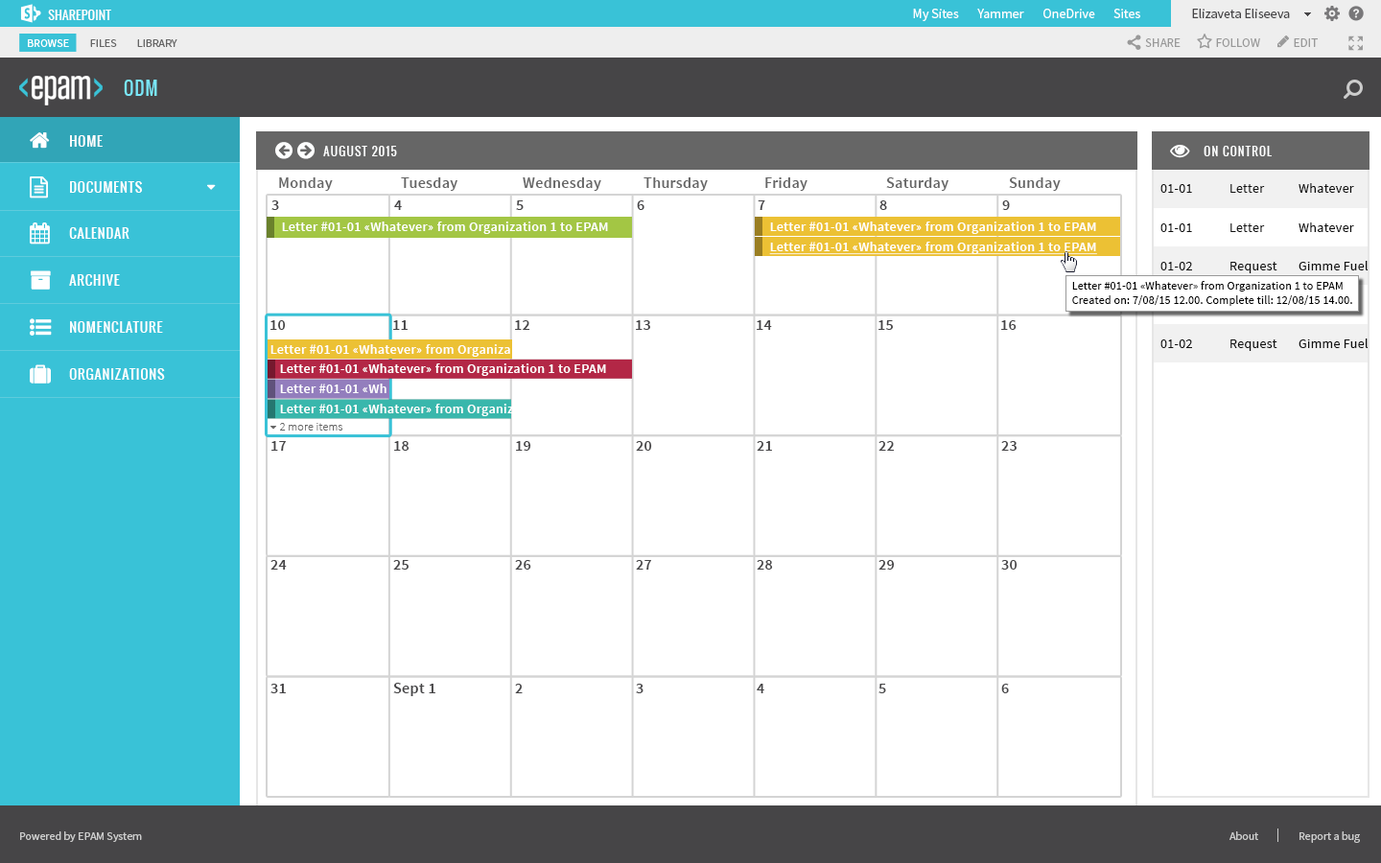
<style>
.page{position:relative;width:1381px;height:863px;background:#ffffff}
.page>*{position:absolute;margin:0}
.t1{font:17.3px "Oswald-Regular";letter-spacing:0.06em;color:#7ae6f7;text-transform:uppercase}
.t2{font:13.4px "Oswald-Regular";letter-spacing:0.06em;color:#ffffff}
.t3{font:11.5px "Oswald-Regular";letter-spacing:0.1em;color:#feffff;text-transform:uppercase}
.t4{font:13.4px "Oswald-Regular";letter-spacing:0.06em;color:#ffffff;text-transform:uppercase}
.t5{font:15.3px "SourceSansPro-Semibold";letter-spacing:0.02em;color:#666666}
.t6{font:13.4px "SourceSansPro-Regular";letter-spacing:0.02em;color:#111111}
.t7{font:15.3px "SourceSansPro-Semibold";letter-spacing:0.02em;color:#464547}
.t8{font:13.4px "SourceSansPro-Semibold";letter-spacing:0.02em;color:#ffffff}
.t9{font:13.4px "SourceSansPro-Semibold";letter-spacing:0.02em;color:#ffffff;text-decoration:underline}
.t10{font:11.5px "SourceSansPro-Regular";letter-spacing:0.02em;color:#000000}
.t11{font:15.3px "SourceSansPro-Semibold";letter-spacing:0.02em;color:#444444}
.t12{font:11.5px "SourceSansPro-Light";letter-spacing:0.02em;color:#666666}
</style>
<div class="page">
<p class="t1" style="left:124px;top:80px;width:33px;height:16px">odm</p>
<p class="t2" style="left:70px;top:135px;width:33px;height:12px">HOME</p>
<p class="t3" style="left:323px;top:146px;width:74px;height:10px">august 2015</p>
<p class="t3" style="left:1204px;top:146px;width:68px;height:10px">on control</p>
<p class="t4" style="left:70px;top:181px;width:72px;height:12px">DOCUMENTS</p>
<p class="t5" style="left:279px;top:177px;width:54px;height:14px">Monday</p>
<p class="t5" style="left:401px;top:177px;width:57px;height:14px">Tuesday</p>
<p class="t5" style="left:523px;top:177px;width:78px;height:14px">Wednesday</p>
<p class="t5" style="left:644px;top:177px;width:64px;height:14px">Thursday</p>
<p class="t5" style="left:765px;top:177px;width:43px;height:14px">Friday</p>
<p class="t5" style="left:886px;top:177px;width:63px;height:14px">Saturday</p>
<p class="t5" style="left:1009px;top:177px;width:52px;height:14px">Sunday</p>
<p class="t6" style="left:1161px;top:183px;width:193px;height:10px">01-01  Letter Whatever</p>
<p class="t7" style="left:271px;top:200px;width:8px;height:10px">3</p>
<p class="t7" style="left:394px;top:200px;width:8px;height:10px">4</p>
<p class="t7" style="left:516px;top:200px;width:8px;height:10px">5</p>
<p class="t7" style="left:637px;top:200px;width:8px;height:10px">6</p>
<p class="t7" style="left:758px;top:200px;width:7px;height:10px">7</p>
<p class="t7" style="left:880px;top:200px;width:7px;height:10px">8</p>
<p class="t7" style="left:1002px;top:200px;width:8px;height:10px">9</p>
<p class="t8" style="left:282px;top:222px;width:326px;height:12px">Letter #01-01 «Whatever» from Organization 1 to EPAM</p>
<p class="t8" style="left:770px;top:222px;width:326px;height:12px">Letter #01-01 «Whatever» from Organization 1 to EPAM</p>
<p class="t4" style="left:69px;top:227px;width:60px;height:12px">CALENDAR</p>
<p class="t6" style="left:1161px;top:223px;width:193px;height:9px">01-01  Letter Whatever</p>
<p class="t9" style="left:769px;top:242px;width:328px;height:13px">Letter #01-01 «Whatever» from Organization 1 to EPAM</p>
<p class="t6" style="left:1161px;top:261px;width:208px;height:12px">01-02  Request Gimme Fuel</p>
<p class="t4" style="left:69px;top:274px;width:51px;height:12px">ARCHIVE</p>
<p class="t10" style="left:1072px;top:281px;width:280px;height:25px">Letter #01-01 «Whatever» from Organization 1 to EPAM<br>Created on: 7/08/15 12.00. Complete till: 12/08/15 14.00.</p>
<p class="t4" style="left:70px;top:321px;width:93px;height:12px">Nomenclature</p>
<p class="t11" style="left:270px;top:320px;width:16px;height:10px">10</p>
<p class="t7" style="left:393px;top:320px;width:15px;height:10px">11</p>
<p class="t7" style="left:515px;top:320px;width:15px;height:10px">12</p>
<p class="t7" style="left:636px;top:320px;width:14px;height:10px">13</p>
<p class="t7" style="left:757px;top:320px;width:15px;height:10px">14</p>
<p class="t7" style="left:879px;top:320px;width:14px;height:10px">15</p>
<p class="t7" style="left:1001px;top:320px;width:16px;height:10px">16</p>
<p class="t6" style="left:1161px;top:339px;width:208px;height:12px">01-02  Request Gimme Fuel</p>
<p class="t8" style="left:270px;top:344px;width:240px;height:13px">Letter #01-01 «Whatever» from Organiza</p>
<p class="t8" style="left:280px;top:364px;width:326px;height:12px">Letter #01-01 «Whatever» from Organization 1 to EPAM</p>
<p class="t4" style="left:69px;top:368px;width:96px;height:12px">Organizations</p>
<p class="t8" style="left:280px;top:384px;width:107px;height:9px">Letter #01-01 «Wh</p>
<p class="t8" style="left:280px;top:404px;width:233px;height:12px">Letter #01-01 «Whatever» from Organiz</p>
<p class="t12" style="left:280px;top:423px;width:63px;height:8px">2 more items</p>
<p class="t7" style="left:271px;top:441px;width:15px;height:10px">17</p>
<p class="t7" style="left:394px;top:441px;width:16px;height:10px">18</p>
<p class="t7" style="left:516px;top:441px;width:15px;height:10px">19</p>
<p class="t7" style="left:636px;top:441px;width:16px;height:10px">20</p>
<p class="t7" style="left:757px;top:441px;width:15px;height:10px">21</p>
<p class="t7" style="left:879px;top:441px;width:16px;height:10px">22</p>
<p class="t7" style="left:1001px;top:441px;width:16px;height:10px">23</p>
<p class="t7" style="left:270px;top:560px;width:17px;height:10px">24</p>
<p class="t7" style="left:393px;top:560px;width:16px;height:10px">25</p>
<p class="t7" style="left:515px;top:560px;width:16px;height:10px">26</p>
<p class="t7" style="left:636px;top:560px;width:15px;height:10px">27</p>
<p class="t7" style="left:757px;top:560px;width:16px;height:10px">28</p>
<p class="t7" style="left:879px;top:560px;width:16px;height:10px">29</p>
<p class="t7" style="left:1001px;top:560px;width:17px;height:10px">30</p>
<p class="t7" style="left:270px;top:684px;width:16px;height:10px">31</p>
<p class="t7" style="left:393px;top:683px;width:42px;height:13px">Sept 1</p>
<p class="t7" style="left:515px;top:684px;width:8px;height:10px">2</p>
<p class="t7" style="left:636px;top:684px;width:8px;height:10px">3</p>
<p class="t7" style="left:757px;top:684px;width:7px;height:10px">4</p>
<p class="t7" style="left:879px;top:684px;width:7px;height:10px">5</p>
<p class="t7" style="left:1001px;top:684px;width:8px;height:10px">6</p>
</div>
